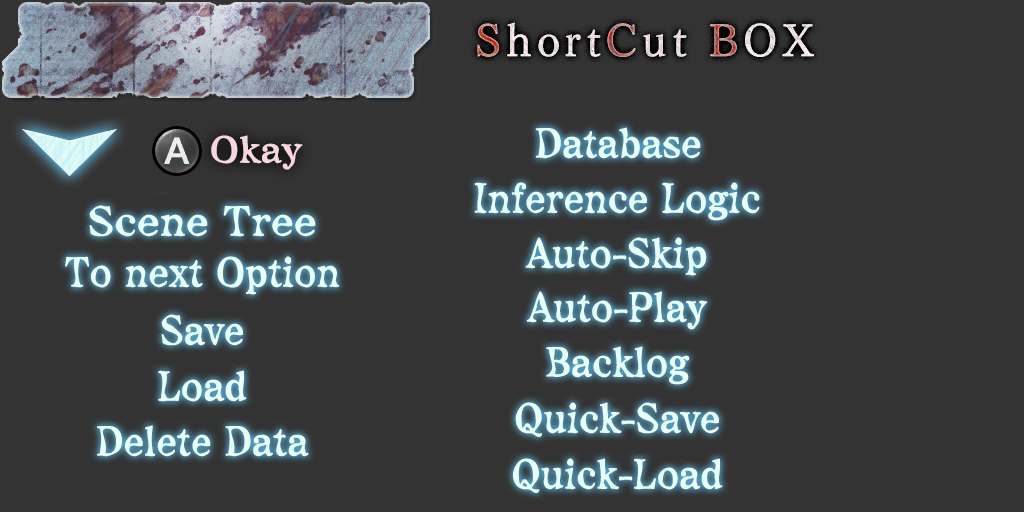
<style>
.page{position:relative;width:1024px;height:512px;background:#333333}
.page>*{position:absolute;margin:0}
.t1{font:37px "maidouComicMystery";color:#f7d7de}
.t2{font:41px "maidouComicMystery";color:#ffffff;scale:0.9 1}
.t3{font:41px "maidouComicMystery";color:#ffffff}
</style>
<div class="page">
<p class="t1" style="left:211px;top:135px;width:92px;height:35px">Okay</p>
<p class="t2" style="left:535px;top:127px;width:166px;height:32px">Database</p>
<p class="t2" style="left:474px;top:182px;width:286px;height:39px">Inference Logic</p>
<p class="t3" style="left:89px;top:205px;width:227px;height:32px">Scene Tree</p>
<p class="t2" style="left:525px;top:237px;width:182px;height:39px">Auto-Skip</p>
<p class="t2" style="left:65px;top:256px;width:275px;height:39px">To next Option</p>
<p class="t2" style="left:526px;top:291px;width:182px;height:39px">Auto-Play</p>
<p class="t2" style="left:161px;top:314px;width:82px;height:32px">Save</p>
<p class="t2" style="left:546px;top:346px;width:144px;height:39px">Backlog</p>
<p class="t2" style="left:158px;top:370px;width:89px;height:32px">Load</p>
<p class="t2" style="left:515px;top:402px;width:204px;height:35px">Quick-Save</p>
<p class="t2" style="left:97px;top:425px;width:212px;height:32px">Delete Data</p>
<p class="t2" style="left:513px;top:458px;width:210px;height:35px">Quick-Load</p>
</div>
